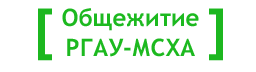
<style>
.page{position:relative;width:256px;height:72px;background:#ffffff}
.page>*{position:absolute;margin:0}
.t1{font:55px "TrebuchetMS-Bold";color:#1cb81f}
.t2{font:24px/30px "TrebuchetMS-Bold";color:#1cb91f}
</style>
<div class="page">
<p class="t1" style="left:38px;top:8px;width:185px;height:53px">[         ]</p>
<p class="t2" style="left:62px;top:8px;width:137px;height:49px;text-align:center">Общежитие<br>РГАУ-МСХА</p>
</div>
